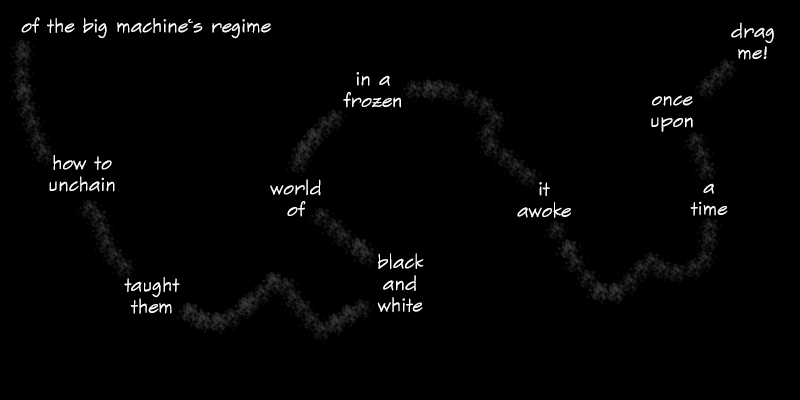
<style>
.page{position:relative;width:800px;height:400px;background:#000000}
.page>*{position:absolute;margin:0}
.t1{font:18px "SketchFlowPrint";color:#ffffff}
</style>
<div class="page">
<p class="t1" style="left:21px;top:17px;width:250px;height:22px">of the big machine‘s regime</p>
<p class="t1" style="left:731px;top:22px;width:43px;height:38px;text-align:center">drag<br>me!</p>
<p class="t1" style="left:343px;top:72px;width:58px;height:36px;text-align:center">in a<br>frozen</p>
<p class="t1" style="left:651px;top:95px;width:42px;height:37px;text-align:center">once<br>upon</p>
<p class="t1" style="left:49px;top:155px;width:66px;height:37px;text-align:center">how to<br>unchain</p>
<p class="t1" style="left:270px;top:179px;width:51px;height:38px;text-align:center">world<br>of</p>
<p class="t1" style="left:517px;top:182px;width:54px;height:36px;text-align:center">it<br>awoke</p>
<p class="t1" style="left:690px;top:183px;width:38px;height:33px;text-align:center">a<br>time</p>
<p class="t1" style="left:377px;top:253px;width:47px;height:60px;text-align:center">black<br>and<br>white</p>
<p class="t1" style="left:124px;top:277px;width:56px;height:37px;text-align:center">taught<br>them</p>
</div>
